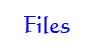
<style>
.page{position:relative;width:100px;height:50px;background:#ffffff}
.page>*{position:absolute;margin:0}
.t1{font:24px "Calligraphic421BT-RomanB";color:#0000ff}
</style>
<div class="page">
<p class="t1" style="left:24px;top:16px;width:46px;height:18px">Files</p>
</div>
